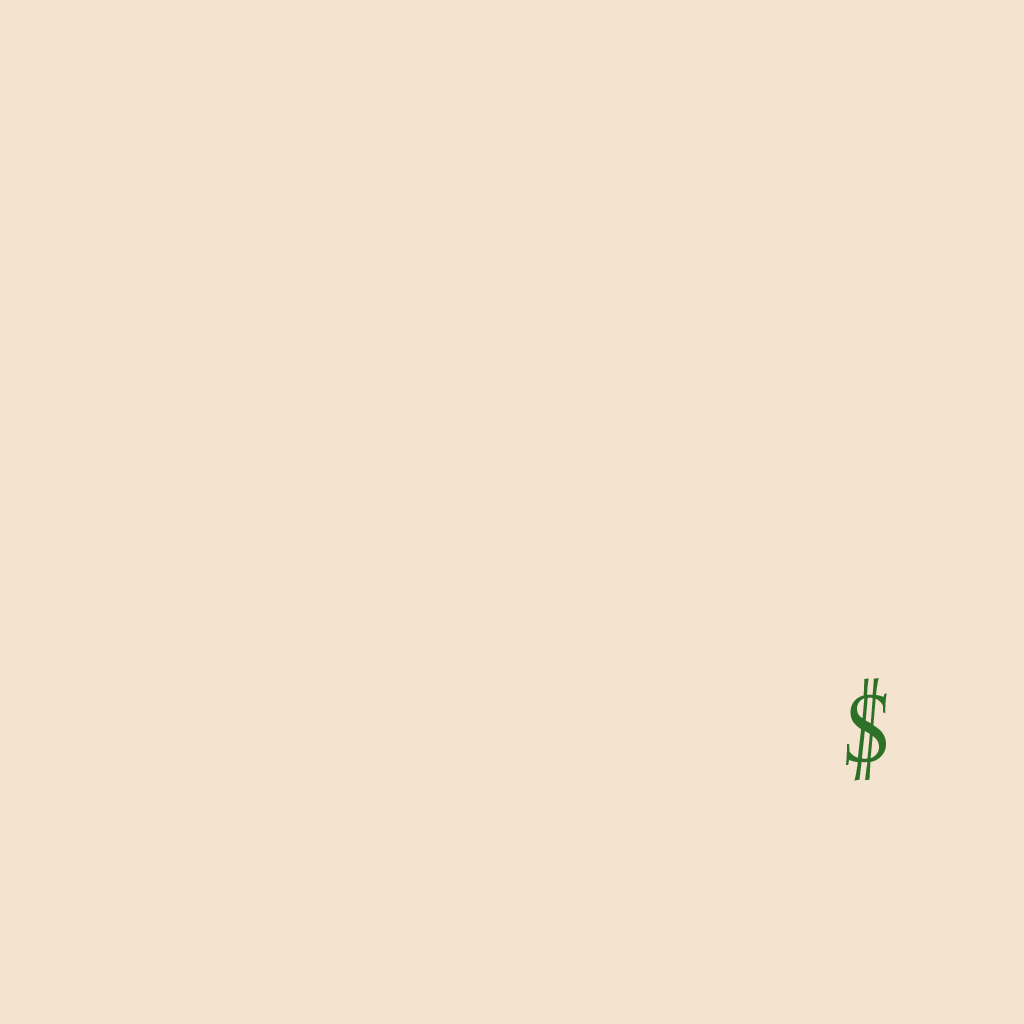
<style>
.page{position:relative;width:1024px;height:1024px;background:#f4e3cf}
.page>*{position:absolute;margin:0}
.t1{font:100px "CharlemagneStd-Bold";color:#2d7129}
</style>
<div class="page">
<p class="t1" style="left:846px;top:678px;width:41px;height:103px">$</p>
</div>
